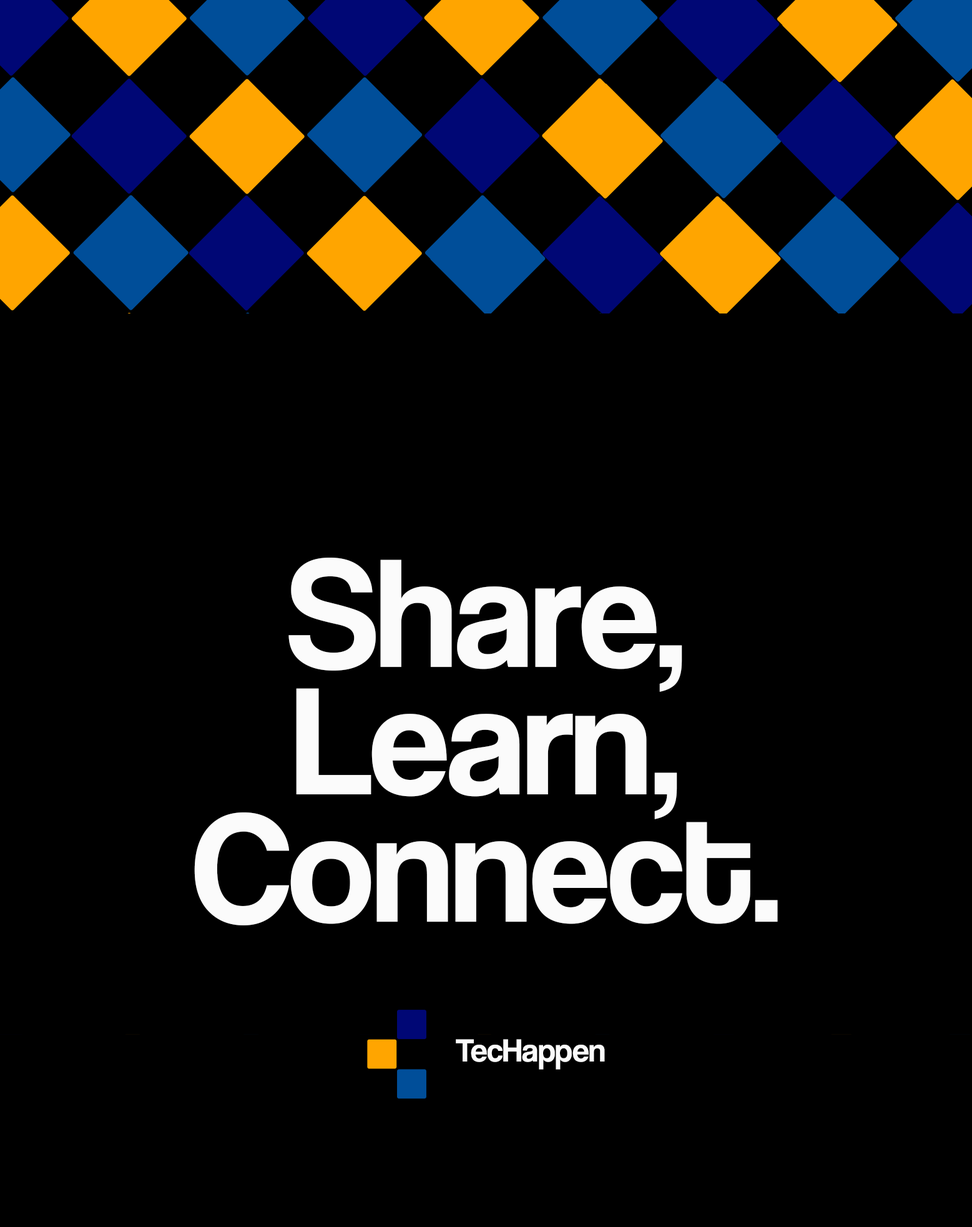
<style>
.page{position:relative;width:972px;height:1227px;background:#000000}
.page>*{position:absolute;margin:0}
.t1{font:159.2px/127.4px "CoolveticaRg-Regular";letter-spacing:-0.005em;color:#fbfbfb}
.t2{font:33.4px "CoolveticaRg-Regular";letter-spacing:-0.005em;color:#fbfbfb}
</style>
<div class="page">
<p class="t1" style="left:194px;top:557px;width:584px;height:368px;text-align:center">Share,<br>Learn,<br>Connect.</p>
<p class="t2" style="left:456px;top:1039px;width:149px;height:30px">TecHappen</p>
</div>
